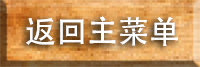
<style>
.page{position:relative;width:200px;height:67px}
.page>*{position:absolute;margin:0}
.t1{font:31.3px "AdobeHeitiStd-Regular";color:#ffffff}
</style>
<div class="page">
<p class="t1" style="left:26px;top:16px;width:152px;height:30px">返回主菜单</p>
</div>
